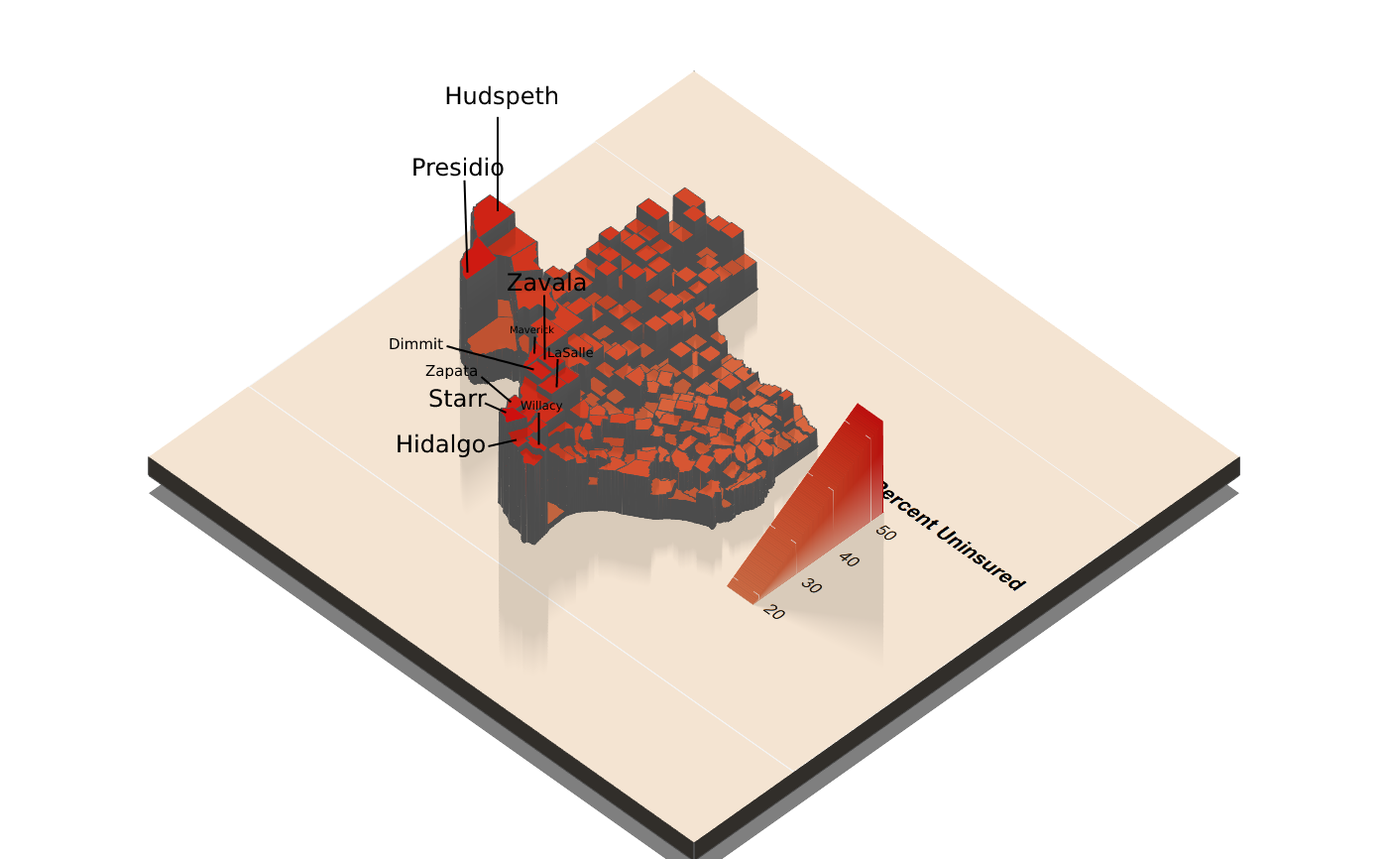
<style>
.page{position:relative;width:1388px;height:859px;background:#ffffff}
.page>*{position:absolute;margin:0}
.t1{font:23.8px "DejaVuSans";color:#000000}
.t2{font:9.9px "DejaVuSans";color:#000000}
.t3{font:14.9px "DejaVuSans";color:#000000}
.t4{font:12.9px "DejaVuSans";color:#000000}
.t5{font:11.9px "DejaVuSans";color:#000000}
</style>
<div class="page">
<p class="t1" style="left:446px;top:85px;width:112px;height:24px">Hudspeth</p>
<p class="t1" style="left:414px;top:157px;width:90px;height:20px">Presidio</p>
<p class="t1" style="left:508px;top:272px;width:78px;height:20px">Zavala</p>
<p class="t2" style="left:510px;top:325px;width:44px;height:9px">Maverick</p>
<p class="t3" style="left:390px;top:337px;width:53px;height:12px">Dimmit</p>
<p class="t4" style="left:548px;top:347px;width:45px;height:11px">LaSalle</p>
<p class="t3" style="left:425px;top:365px;width:52px;height:15px">Zapata</p>
<p class="t1" style="left:429px;top:389px;width:58px;height:19px">Starr</p>
<p class="t5" style="left:521px;top:400px;width:42px;height:13px">Willacy</p>
<p class="t1" style="left:398px;top:433px;width:87px;height:24px">Hidalgo</p>
</div>
